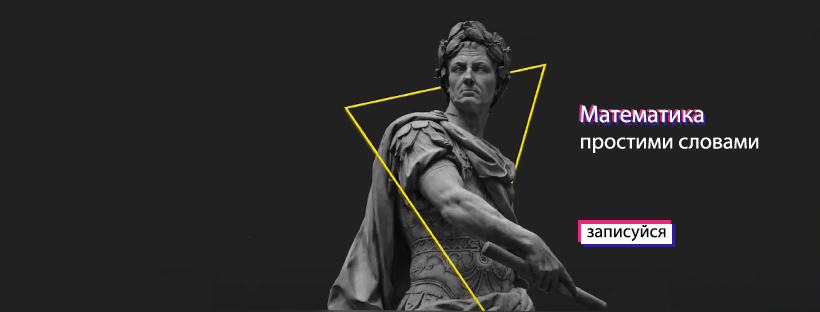
<style>
.page{position:relative;width:820px;height:312px;background:#212121}
.page>*{position:absolute;margin:0}
.t1{font:24px "MyriadPro-Regular"}
.t2{font:18px "MyriadPro-Regular";color:#000000}
</style>
<div class="page">
<p class="t1" style="left:579px;top:104px;width:123px;height:18px">Математика</p>
<p class="t2" style="left:587px;top:224px;width:79px;height:18px">записуйся</p>
</div>
